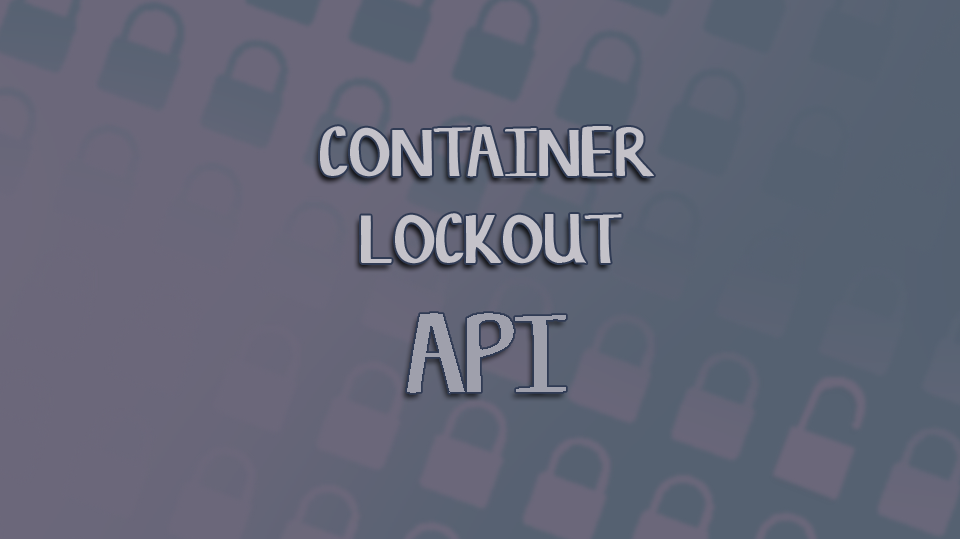
<style>
.page{position:relative;width:960px;height:539px}
.page>*{position:absolute;margin:0}
.t1{font:72px "ChiselMark";color:#c4c2c9}
.t2{font:115px "ChiselMark";color:#9fa0ac}
</style>
<div class="page">
<p class="t1" style="left:320px;top:126px;width:334px;height:138px;text-align:center">CONTAINER <br>LOCKOUT</p>
<p class="t2" style="left:407px;top:313px;width:159px;height:80px">API</p>
</div>
